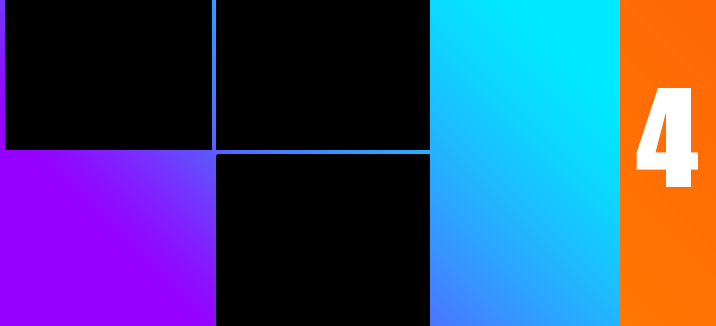
<style>
.page{position:relative;width:716px;height:326px;background:#000000}
.page>*{position:absolute;margin:0}
.t1{font:125px "Impact";color:#ffffff}
</style>
<div class="page">
<p class="t1" style="left:636px;top:88px;width:62px;height:99px">4</p>
</div>
